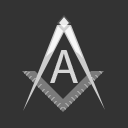
<style>
.page{position:relative;width:128px;height:128px;background:#333333}
.page>*{position:absolute;margin:0}
.t1{font:48px "MyriadPro-Regular";color:#d7d7d7;scale:1.03 1}
</style>
<div class="page">
<p class="t1" style="left:50px;top:50px;width:28px;height:33px">A</p>
</div>
